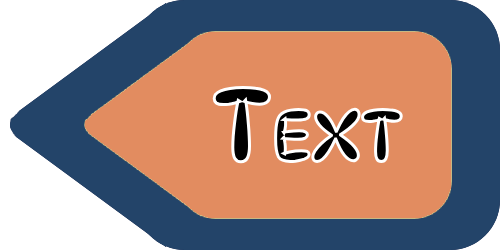
<style>
.page{position:relative;width:500px;height:250px;background:#e28c60}
.page>*{position:absolute;margin:0}
.t1{font:100px "DynaPuff-Regular";font-variant:small-caps}
</style>
<div class="page">
<p class="t1" style="left:211px;top:84px;width:194px;height:81px">Text</p>
</div>
